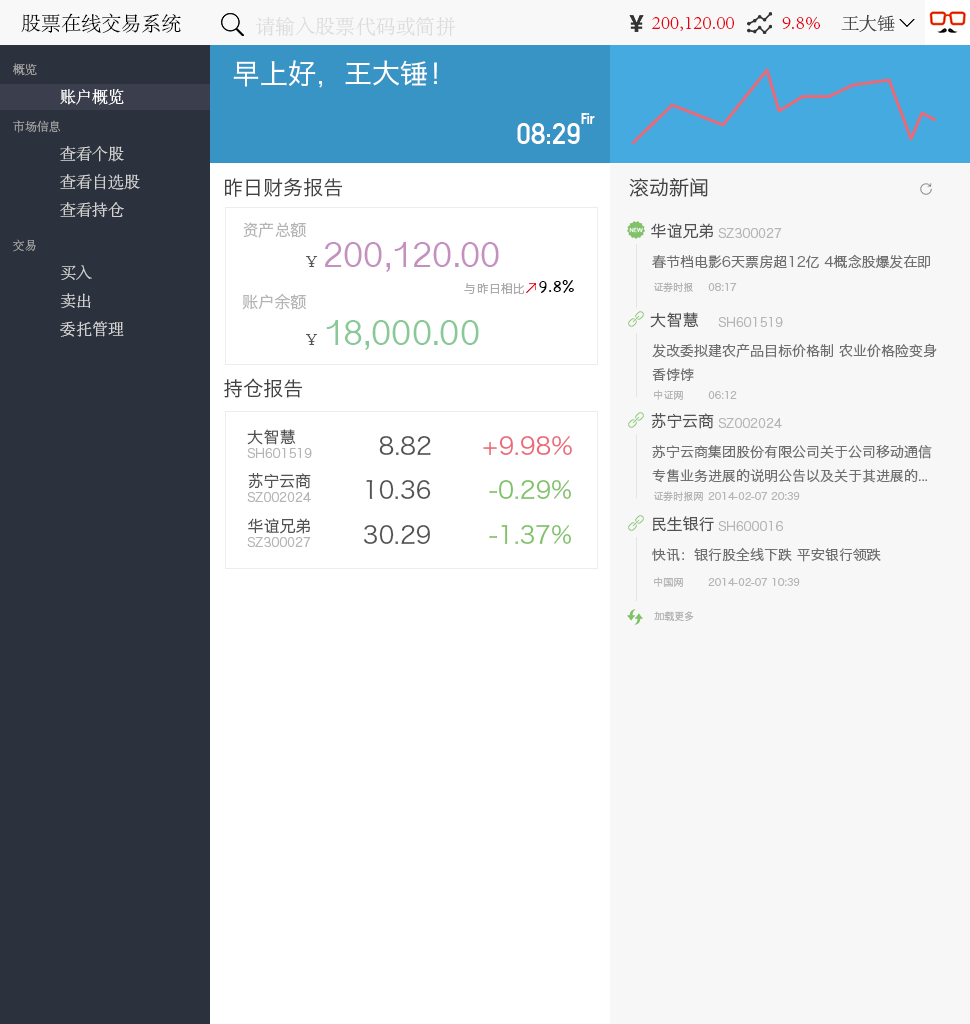
<style>
.page{position:relative;width:970px;height:1024px;background:#ffffff}
.page>*{position:absolute;margin:0}
.t1{font:20px "AdobeSongStd-Light";color:#000000}
.t2{font:20px "AdobeSongStd-Light";color:#dcdcdc}
.t3{font:20px "AdobeSongStd-Light";color:#e60012}
.t4{font:18px "AdobeSongStd-Light";color:#434343}
.t5{font:12px "AdobeSongStd-Light";color:#a0a0a0}
.t6{font:28px "HiraginoSansGB-W3";color:#ffffff}
.t7{font:16px "AdobeSongStd-Light";color:#ffffff}
.t8{font:16px "DINCondensed-Bold";color:#ffffff}
.t9{font:29.6px "DINAlternate-Bold";color:#ffffff}
.t10{font:16px "AdobeSongStd-Light";color:#d2d2d2}
.t11{font:20px "HiraginoSansGB-W3";color:#434343}
.t12{font:16px "HiraginoSansGB-W3";color:#b5b5b5}
.t13{font:16px "HiraginoSansGB-W3";color:#535353}
.t14{font:12px "HiraginoSansGB-W3";color:#b5b5b5}
.t15{font:36px "DevanagariSangamMN";color:#c490bf}
.t16{font:16px "AdobeSongStd-Light";color:#535353}
.t17{font:14px "HiraginoSansGB-W3";color:#707070}
.t18{font:16px "Chalkboard";color:#000000}
.t19{font:12px "HiraginoSansGB-W3";color:#aaaaaa}
.t20{font:10px "HiraginoSansGB-W3";color:#b5b5b5}
.t21{font:36px "DevanagariSangamMN";color:#89c997}
.t22{font:24px "HiraginoSansGB-W3";color:#535353}
.t23{font:24px "HiraginoSansGB-W3";color:#eb6877}
.t24{font:24px "HiraginoSansGB-W3";color:#80c269}
</style>
<div class="page">
<p class="t1" style="left:21px;top:13px;width:160px;height:21px">股票在线交易系统</p>
<p class="t2" style="left:255px;top:16px;width:200px;height:21px">请输入股票代码或简拼</p>
<p class="t3" style="left:652px;top:17px;width:82px;height:14px">200,120.00</p>
<p class="t3" style="left:782px;top:16px;width:38px;height:14px">9.8%</p>
<p class="t4" style="left:841px;top:15px;width:54px;height:17px">王大锤</p>
<p class="t5" style="left:13px;top:63px;width:24px;height:13px">概览</p>
<p class="t6" style="left:233px;top:60px;width:204px;height:28px">早上好，王大锤！</p>
<p class="t7" style="left:60px;top:89px;width:64px;height:16px">账户概览</p>
<p class="t8" style="left:581px;top:113px;width:14px;height:11px">Fir</p>
<p class="t5" style="left:13px;top:120px;width:47px;height:13px">市场信息</p>
<p class="t9" style="left:517px;top:123px;width:63px;height:21px">08:29</p>
<p class="t10" style="left:60px;top:146px;width:64px;height:16px">查看个股</p>
<p class="t10" style="left:60px;top:174px;width:80px;height:16px">查看自选股</p>
<p class="t11" style="left:224px;top:178px;width:118px;height:19px">昨日财务报告</p>
<p class="t11" style="left:629px;top:178px;width:79px;height:19px">滚动新闻</p>
<p class="t10" style="left:60px;top:202px;width:64px;height:15px">查看持仓</p>
<p class="t12" style="left:243px;top:222px;width:63px;height:16px">资产总额</p>
<p class="t13" style="left:651px;top:223px;width:62px;height:16px">华谊兄弟</p>
<p class="t14" style="left:718px;top:228px;width:64px;height:10px">SZ300027</p>
<p class="t5" style="left:13px;top:239px;width:23px;height:13px">交易</p>
<p class="t15" style="left:325px;top:242px;width:174px;height:30px">200,120.00</p>
<p class="t16" style="left:305px;top:256px;width:13px;height:11px">￥</p>
<p class="t17" style="left:652px;top:254px;width:278px;height:15px">春节档电影6天票房超12亿 4概念股爆发在即</p>
<p class="t10" style="left:60px;top:265px;width:32px;height:15px">买入</p>
<p class="t18" style="left:539px;top:280px;width:35px;height:13px">9.8%</p>
<p class="t10" style="left:60px;top:293px;width:31px;height:15px">卖出</p>
<p class="t12" style="left:242px;top:293px;width:64px;height:17px">账户余额</p>
<p class="t19" style="left:464px;top:282px;width:61px;height:12px">与昨日相比</p>
<p class="t20" style="left:653px;top:282px;width:40px;height:10px">证券时报</p>
<p class="t20" style="left:708px;top:283px;width:29px;height:8px">08:17</p>
<p class="t13" style="left:650px;top:312px;width:49px;height:16px">大智慧</p>
<p class="t14" style="left:718px;top:317px;width:65px;height:10px">SH601519</p>
<p class="t10" style="left:60px;top:321px;width:64px;height:16px">委托管理</p>
<p class="t21" style="left:326px;top:320px;width:153px;height:30px">18,000.00</p>
<p class="t16" style="left:305px;top:334px;width:13px;height:11px">￥</p>
<p class="t17" style="left:652px;top:343px;width:285px;height:38px">发改委拟建农产品目标价格制 农业价格险变身<br>香饽饽</p>
<p class="t11" style="left:224px;top:378px;width:78px;height:20px">持仓报告</p>
<p class="t20" style="left:654px;top:390px;width:29px;height:10px">中证网</p>
<p class="t20" style="left:708px;top:391px;width:29px;height:8px">06:12</p>
<p class="t13" style="left:651px;top:413px;width:63px;height:16px">苏宁云商</p>
<p class="t14" style="left:718px;top:418px;width:64px;height:10px">SZ002024</p>
<p class="t13" style="left:247px;top:429px;width:49px;height:16px">大智慧</p>
<p class="t22" style="left:379px;top:436px;width:52px;height:20px">8.82</p>
<p class="t23" style="left:483px;top:436px;width:89px;height:19px">+9.98%</p>
<p class="t14" style="left:247px;top:448px;width:65px;height:10px">SH601519</p>
<p class="t17" style="left:652px;top:445px;width:280px;height:38px">苏宁云商集团股份有限公司关于公司移动通信<br>专售业务进展的说明公告以及关于其进展的...</p>
<p class="t13" style="left:248px;top:473px;width:63px;height:16px">苏宁云商</p>
<p class="t22" style="left:366px;top:480px;width:65px;height:19px">10.36</p>
<p class="t24" style="left:489px;top:480px;width:82px;height:20px">-0.29%</p>
<p class="t14" style="left:247px;top:492px;width:64px;height:10px">SZ002024</p>
<p class="t20" style="left:653px;top:491px;width:50px;height:10px">证券时报网</p>
<p class="t20" style="left:708px;top:492px;width:92px;height:8px">2014-02-07 20:39</p>
<p class="t13" style="left:248px;top:518px;width:62px;height:16px">华谊兄弟</p>
<p class="t13" style="left:652px;top:516px;width:62px;height:16px">民生银行</p>
<p class="t14" style="left:718px;top:521px;width:65px;height:10px">SH600016</p>
<p class="t22" style="left:363px;top:525px;width:67px;height:20px">30.29</p>
<p class="t24" style="left:489px;top:524px;width:82px;height:20px">-1.37%</p>
<p class="t14" style="left:247px;top:537px;width:64px;height:10px">SZ300027</p>
<p class="t17" style="left:652px;top:547px;width:229px;height:15px">快讯：银行股全线下跌 平安银行领跌</p>
<p class="t20" style="left:654px;top:577px;width:29px;height:10px">中国网</p>
<p class="t20" style="left:708px;top:578px;width:92px;height:8px">2014-02-07 10:39</p>
<p class="t20" style="left:654px;top:611px;width:40px;height:10px">加载更多</p>
</div>
